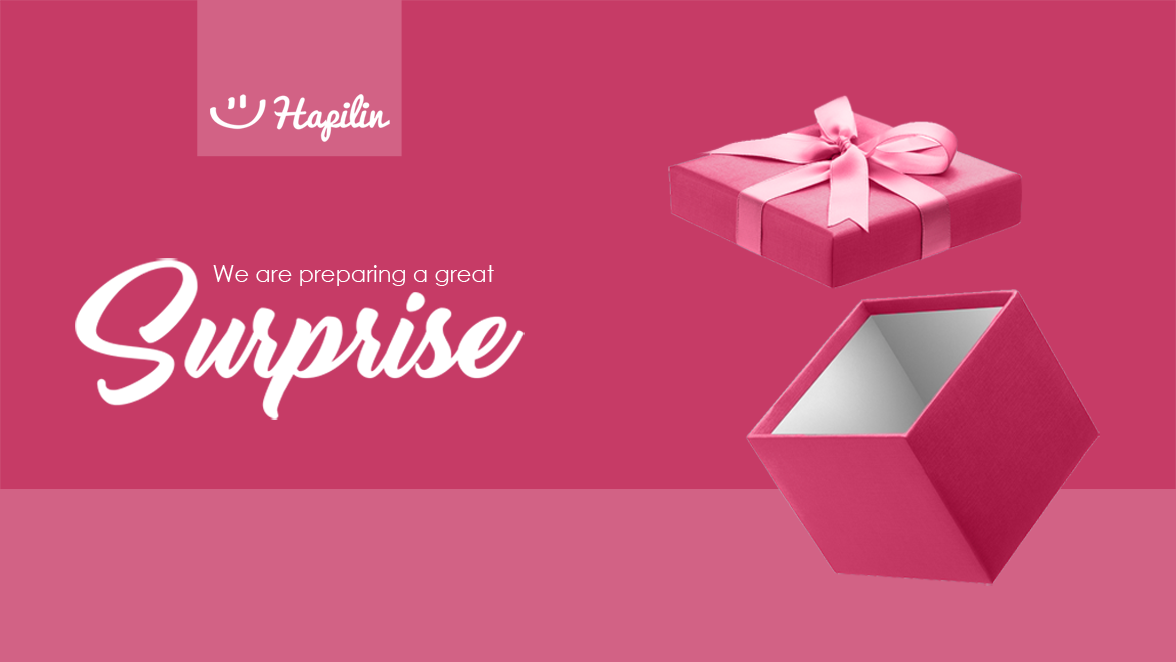
<style>
.page{position:relative;width:1176px;height:662px;background:#c63b66}
.page>*{position:absolute;margin:0}
.t1{font:102.9px "ThinkingOfBetty";color:#ffffff}
.t2{font:22.6px "CenturyGothic";color:#ffffff}
</style>
<div class="page">
<p class="t1" style="left:75px;top:258px;width:450px;height:162px">Surprise</p>
<p class="t2" style="left:213px;top:265px;width:281px;height:21px">We are preparing a great</p>
</div>
